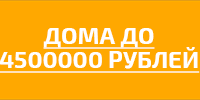
<style>
.page{position:relative;width:200px;height:100px;background:#ffa800}
.page>*{position:absolute;margin:0}
.t1{font:24px/24px "Exo2-Bold";color:#ffffff;text-decoration:underline}
</style>
<div class="page">
<p class="t1" style="left:0px;top:28px;width:200px;height:45px;text-align:center">ДОМА ДО<br>4500000 РУБЛЕЙ</p>
</div>
